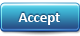
<style>
.page{position:relative;width:80px;height:36px}
.page>*{position:absolute;margin:0}
.t1{font:14.7px "Calibri-Bold";color:#ffffff}
</style>
<div class="page">
<p class="t1" style="left:18px;top:13px;width:42px;height:12px">Accept</p>
</div>
